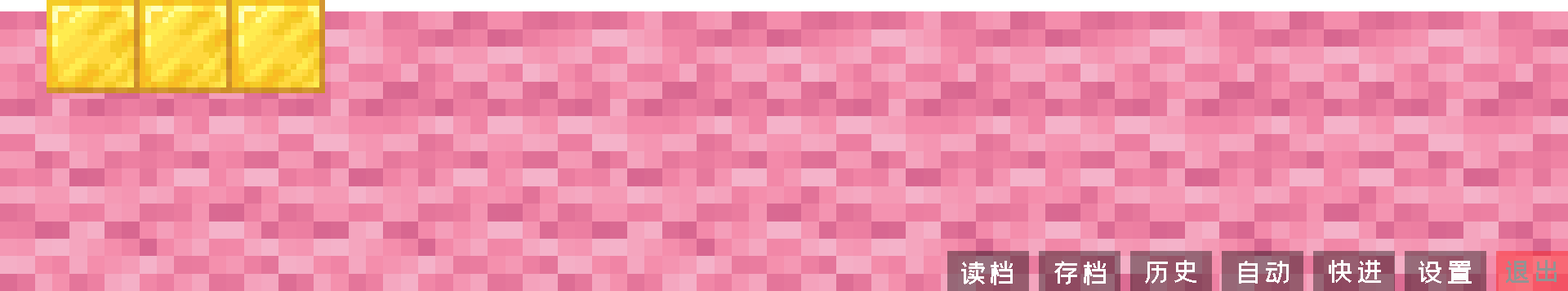
<style>
.page{position:relative;width:1568px;height:291px}
.page>*{position:absolute;margin:0}
.t1{font:29.4px "zihun59hao-chuangcuhei";color:#ffffff}
.t2{font:29.4px "zihun59hao-chuangcuhei";color:#fefefe}
.t3{font:29.4px "zihun59hao-chuangcuhei";color:#939393}
</style>
<div class="page">
<p class="t1" style="left:961px;top:261px;width:145px;height:24px">读档      存档</p>
<p class="t2" style="left:1145px;top:260px;width:51px;height:23px">历史</p>
<p class="t2" style="left:1239px;top:261px;width:50px;height:22px">自动</p>
<p class="t2" style="left:1329px;top:260px;width:52px;height:23px">快进</p>
<p class="t2" style="left:1419px;top:261px;width:53px;height:22px">设置</p>
<p class="t3" style="left:1506px;top:260px;width:51px;height:23px">退出</p>
</div>
